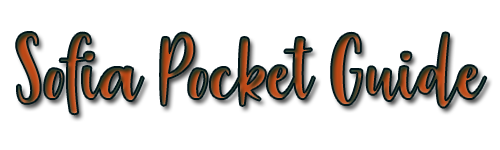
<style>
.page{position:relative;width:500px;height:150px;background:#ffffff}
.page>*{position:absolute;margin:0}
.t1{font:110px "StrawberryBlossom"}
</style>
<div class="page">
<p class="t1" style="left:16px;top:32px;width:471px;height:83px">Sofia Pocket Guide</p>
</div>
